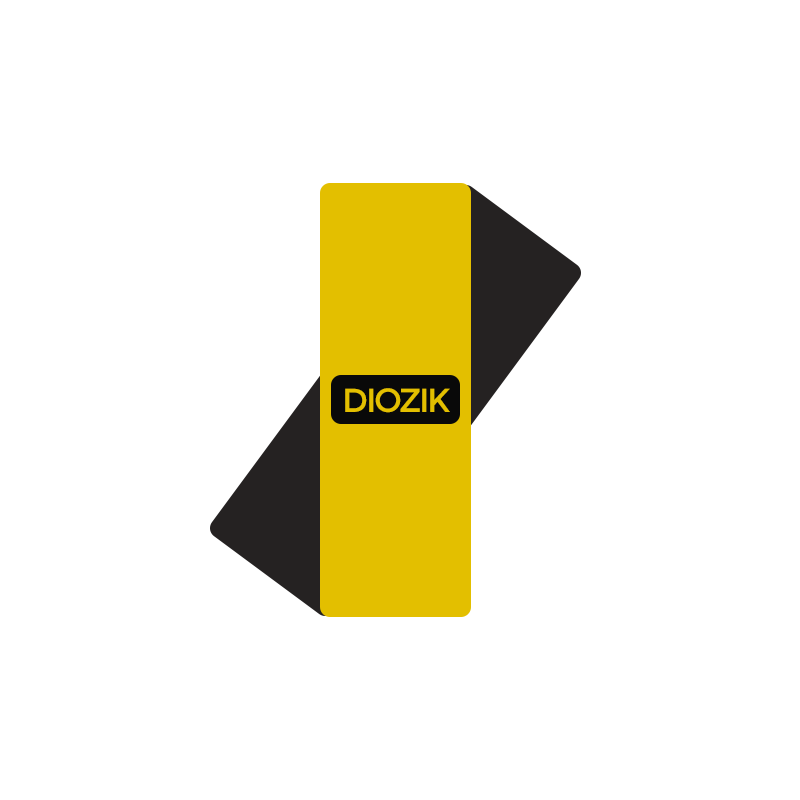
<style>
.page{position:relative;width:800px;height:800px;background:#ffffff}
.page>*{position:absolute;margin:0}
.t1{font:33.3px "Montserrat-Regular";letter-spacing:-0.075em;color:#e3bf00}
</style>
<div class="page">
<p class="t1" style="left:345px;top:388px;width:105px;height:25px">DIOZIK</p>
</div>
